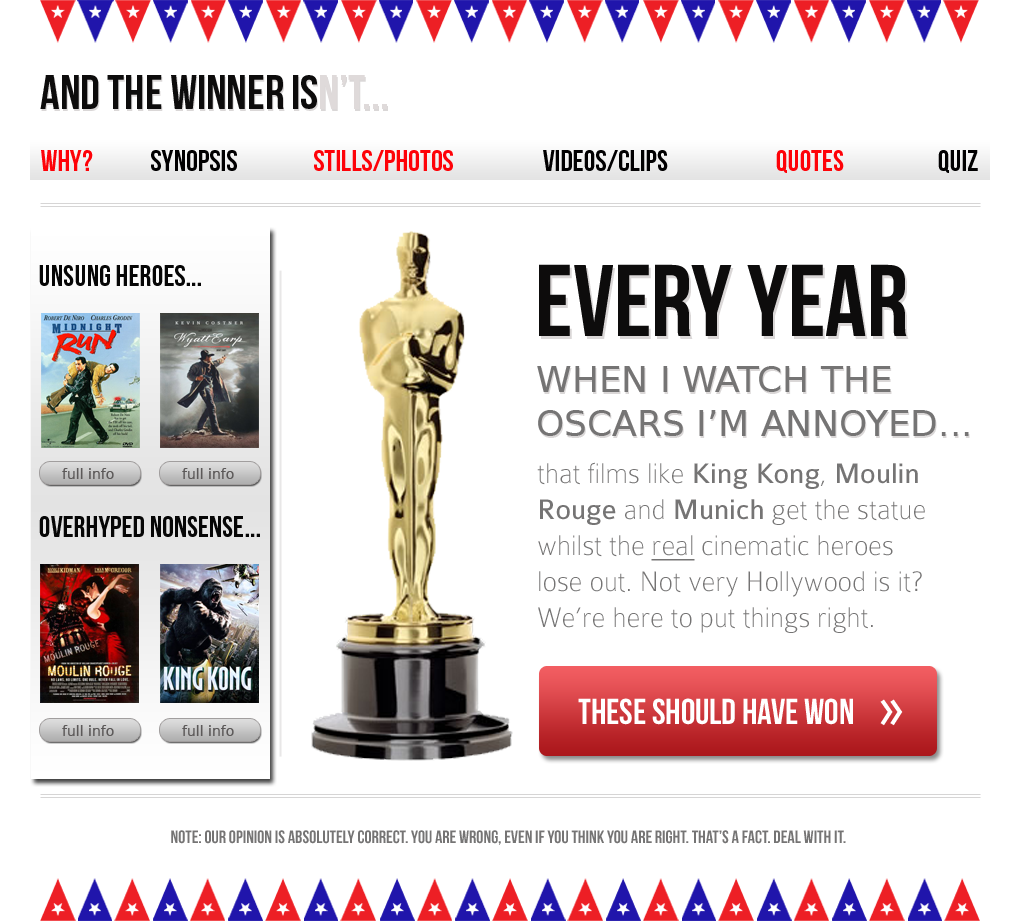
<style>
.page{position:relative;width:1020px;height:921px;background:#ffffff}
.page>*{position:absolute;margin:0}
.t1{font:48px "BebasNeue";color:#0d0c0c}
.t2{font:48px "BebasNeue";color:#dfdada}
.t3{font:30px "BebasNeue";color:#fe0208}
.t4{font:30px "BebasNeue";color:#010001}
.t5{font:30px "BebasNeue";color:#060606}
.t6{font:102px "BebasNeue";color:#0d0c0c}
.t7{font:36px "BitstreamVeraSans-Roman";color:#757474}
.t8{font:30px "Colaborate-Thin";color:#757474}
.t9{font:30px "Colaborate-Regular";color:#757474}
.t10{font:30px "Colaborate-Thin";color:#757474;text-decoration:underline}
.t11{font:14px "BitstreamVeraSans-Roman";color:#5c5959}
.t12{font:36px "BebasNeue";color:#ffffff}
.t13{font:72px "AkzidenzGroteskBQ-Light";color:#ffffff}
.t14{font:18px "BebasNeue";color:#757474}
</style>
<div class="page">
<p class="t1" style="left:40px;top:75px;width:347px;height:34px">AND THE WINNER iS<span class="t2">N’T...</span></p>
<p class="t3" style="left:41px;top:150px;width:52px;height:21px">why?</p>
<p class="t4" style="left:151px;top:150px;width:86px;height:21px">SYNOPSIS</p>
<p class="t3" style="left:314px;top:150px;width:139px;height:21px">STILLS/PHOTOS</p>
<p class="t4" style="left:543px;top:150px;width:125px;height:21px">VIDEOS/CLIPS</p>
<p class="t3" style="left:776px;top:150px;width:68px;height:23px">QUOTES</p>
<p class="t4" style="left:938px;top:150px;width:40px;height:23px">QUIZ</p>
<p class="t5" style="left:39px;top:265px;width:162px;height:21px">UNSUNG HEROES...</p>
<p class="t6" style="left:539px;top:264px;width:368px;height:72px">EVERY year</p>
<p class="t7" style="left:537px;top:366px;width:432px;height:70px">WHEN I WATCH THE OSCARS I’M ANNOYED...</p>
<p class="t8" style="left:537px;top:462px;width:388px;height:171px">that films like <span class="t9">King Kong</span>, <span class="t9">Moulin Rouge</span> and <span class="t9">Munich</span> get the statue whilst the <span class="t10">real</span> cinematic heroes lose out. Not very Hollywood is it?<br>We’re here to put things right.</p>
<p class="t11" style="left:62px;top:468px;width:52px;height:11px">full info</p>
<p class="t11" style="left:182px;top:468px;width:52px;height:11px">full info</p>
<p class="t5" style="left:39px;top:516px;width:221px;height:21px">OVERHYPED NONSENSE...</p>
<p class="t12" style="left:578px;top:698px;width:275px;height:27px">THESE SHOULD HAVE WON</p>
<p class="t13" style="left:880px;top:699px;width:23px;height:27px">»</p>
<p class="t11" style="left:62px;top:725px;width:52px;height:11px">full info</p>
<p class="t11" style="left:182px;top:725px;width:52px;height:11px">full info</p>
<p class="t14" style="left:171px;top:830px;width:675px;height:15px">Note: our opinion is absolutely correct. You are wrong, even if you think you are right. That’s a fact. Deal with it.</p>
</div>
